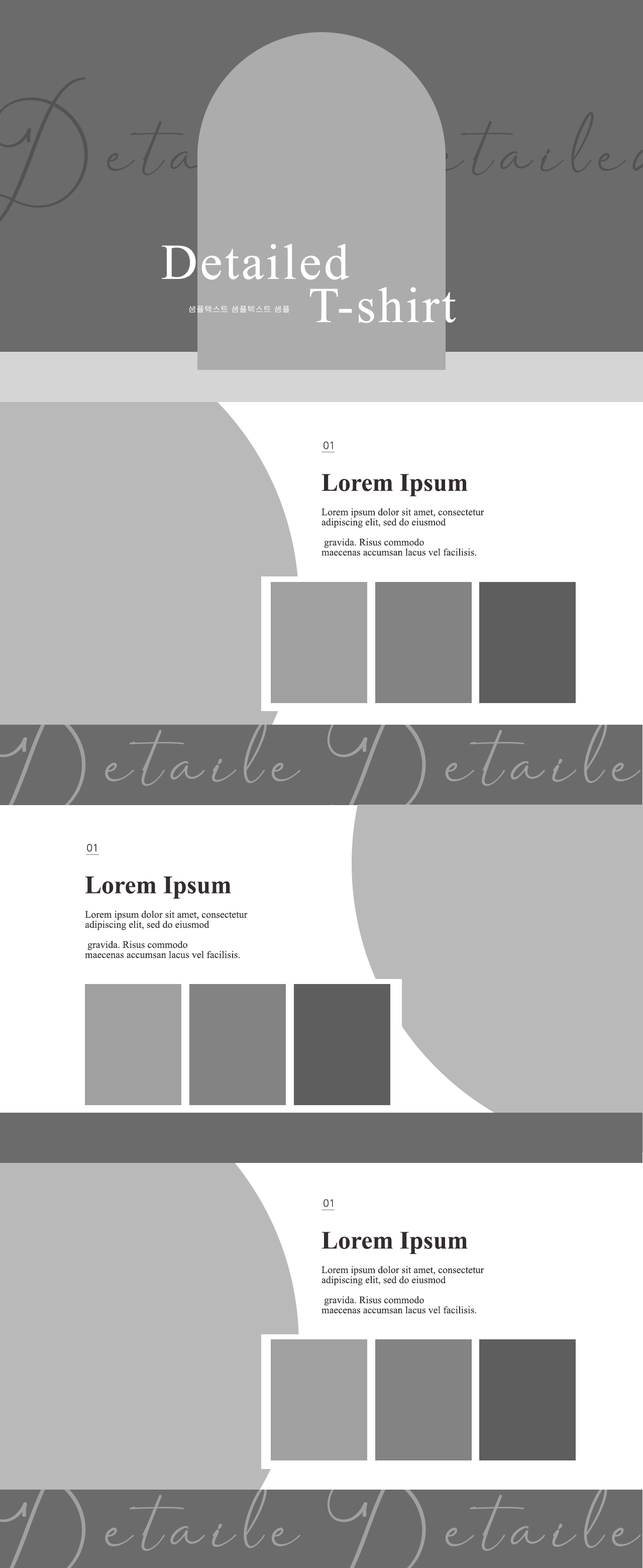
<style>
.page{position:relative;width:643px;height:1568px;background:#b9b9b9}
.page>*{position:absolute;margin:0}
.t1{font:50.3px "TimesNewRomanPSMT";letter-spacing:0.05em;color:#ffffff}
.t2{font:8px "Gulim";color:#ffffff}
.t3{font:10.1px "NanumGothic";color:#342c2c}
.t4{font:25.1px "TimesNewRomanPS-BoldMT";color:#342c2c}
.t5{font:10.1px/10.1px "TimesNewRomanPSMT";color:#342c2c}
</style>
<div class="page">
<p class="t1" style="left:162px;top:244px;width:187px;height:36px">Detailed</p>
<p class="t1" style="left:310px;top:287px;width:146px;height:36px">T-shirt</p>
<p class="t2" style="left:189px;top:306px;width:100px;height:7px">샘플텍스트 샘플텍스트 샘플</p>
<p class="t3" style="left:324px;top:441px;width:9px;height:8px">01</p>
<p class="t4" style="left:322px;top:474px;width:146px;height:23px">Lorem Ipsum</p>
<p class="t5" style="left:322px;top:508px;width:162px;height:48px">Lorem ipsum dolor sit amet, consectetur <br>adipiscing elit, sed do eiusmod <br><br> gravida. Risus commodo<br>maecenas accumsan lacus vel facilisis.</p>
<p class="t3" style="left:87px;top:844px;width:9px;height:8px">01</p>
<p class="t4" style="left:85px;top:876px;width:146px;height:23px">Lorem Ipsum</p>
<p class="t5" style="left:85px;top:911px;width:163px;height:47px">Lorem ipsum dolor sit amet, consectetur <br>adipiscing elit, sed do eiusmod <br><br> gravida. Risus commodo<br>maecenas accumsan lacus vel facilisis.</p>
<p class="t3" style="left:324px;top:1199px;width:9px;height:8px">01</p>
<p class="t4" style="left:322px;top:1232px;width:146px;height:22px">Lorem Ipsum</p>
<p class="t5" style="left:322px;top:1266px;width:162px;height:48px">Lorem ipsum dolor sit amet, consectetur <br>adipiscing elit, sed do eiusmod <br><br> gravida. Risus commodo<br>maecenas accumsan lacus vel facilisis.</p>
</div>
